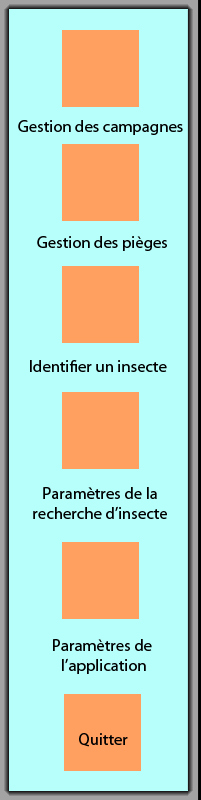
<style>
.page{position:relative;width:201px;height:800px;background:#b7fffb}
.page>*{position:absolute;margin:0}
.t1{font:16.7px "MyriadPro-Regular";color:#000000}
</style>
<div class="page">
<p class="t1" style="left:18px;top:120px;width:165px;height:15px">Gestion des campagnes</p>
<p class="t1" style="left:37px;top:236px;width:130px;height:15px">Gestion des pièges</p>
<p class="t1" style="left:30px;top:360px;width:137px;height:12px">Identifier un insecte</p>
<p class="t1" style="left:33px;top:487px;width:134px;height:32px;text-align:center">Paramètres de la<br>recherche d’insecte</p>
<p class="t1" style="left:53px;top:639px;width:99px;height:35px;text-align:center">Paramètres de<br> l’application</p>
<p class="t1" style="left:79px;top:733px;width:49px;height:14px">Quitter</p>
</div>
